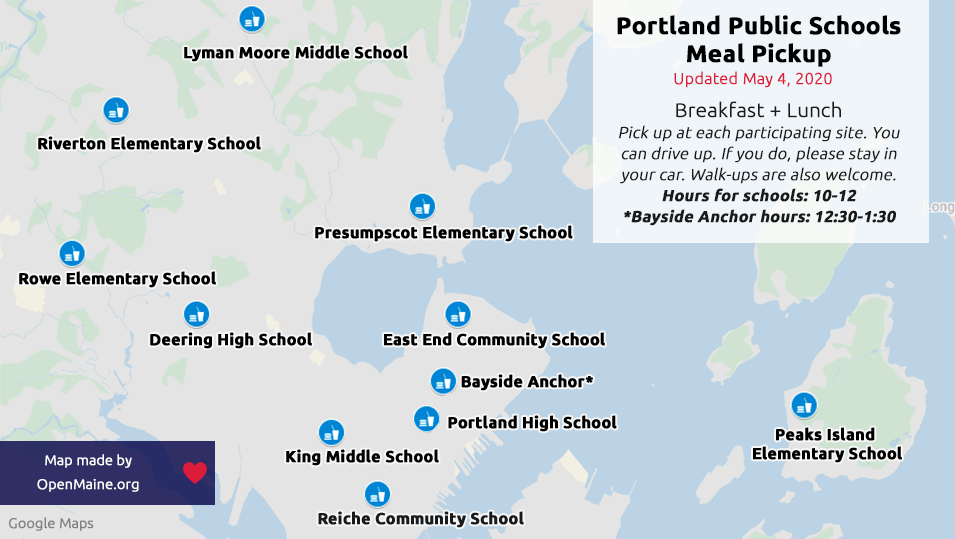
<style>
.page{position:relative;width:955px;height:539px;background:#e4e4e4}
.page>*{position:absolute;margin:0}
.t1{font:24px/28px "Ubuntu-Bold";color:#000000;font-weight:bold}
.t2{font:16px "Ubuntu-Bold";color:#000000;font-weight:bold}
.t3{font:16px "Ubuntu-Light";color:#dc1a3a;font-weight:bold}
.t4{font:16px/21px "Ubuntu-Light";color:#191a1c;font-weight:bold;font-style:italic}
.t5{font:20px/24px "Ubuntu-Bold";color:#191a1c;font-weight:bold}
.t6{font:20px/24px "Ubuntu-Light";color:#191a1c;font-weight:bold}
.t7{font:16px/21px "Ubuntu-Bold";color:#191a1c;font-weight:bold;font-style:italic}
.t8{font:16px/19px "Ubuntu-Bold";color:#000000;font-weight:bold}
.t9{font:14px/24px "Ubuntu-Light";color:#ffffff;font-weight:bold}
.t10{font:14px "Ubuntu-Light";color:#808080;font-weight:bold}
.t11{font:16px "Ubuntu-Bold";color:#191a1c;font-weight:bold}
</style>
<div class="page">
<p class="t1" style="left:617px;top:15px;width:284px;height:52px;text-align:center">Portland Public Schools<br>Meal Pickup</p>
<p class="t2" style="left:184px;top:45px;width:224px;height:17px">Lyman Moore Middle School</p>
<p class="t3" style="left:674px;top:71px;width:158px;height:17px">Updated May 4, 2020</p>
<p class="t4" style="left:619px;top:101px;width:281px;height:125px;text-align:center"><span class="t5"><br></span><span class="t6">Breakfast + Lunch</span><br>Pick up at each participating site. You can drive up. If you do, please stay in your car. Walk-ups are also welcome.<br><span class="t7">Hours for schools: 10-12<br>*Bayside Anchor hours: 12:30-1:30</span></p>
<p class="t2" style="left:38px;top:136px;width:223px;height:17px">Riverton Elementary School</p>
<p class="t2" style="left:315px;top:225px;width:258px;height:17px">Presumpscot Elementary School</p>
<p class="t2" style="left:19px;top:271px;width:197px;height:17px">Rowe Elementary School</p>
<p class="t2" style="left:150px;top:332px;width:162px;height:17px">Deering High School</p>
<p class="t2" style="left:384px;top:332px;width:221px;height:17px">East End Community School</p>
<p class="t2" style="left:461px;top:374px;width:132px;height:17px">Bayside Anchor*</p>
<p class="t2" style="left:448px;top:415px;width:169px;height:17px">Portland High School</p>
<p class="t8" style="left:753px;top:427px;width:149px;height:36px;text-align:center">Peaks Island <br>Elementary School</p>
<p class="t2" style="left:286px;top:449px;width:153px;height:17px">King Middle School</p>
<p class="t9" style="left:37px;top:454px;width:102px;height:38px;text-align:center">Map made by<br>OpenMaine.org</p>
<p class="t10" style="left:9px;top:517px;width:85px;height:14px">Google Maps</p>
<p class="t11" style="left:318px;top:511px;width:206px;height:17px">Reiche Community School</p>
</div>
